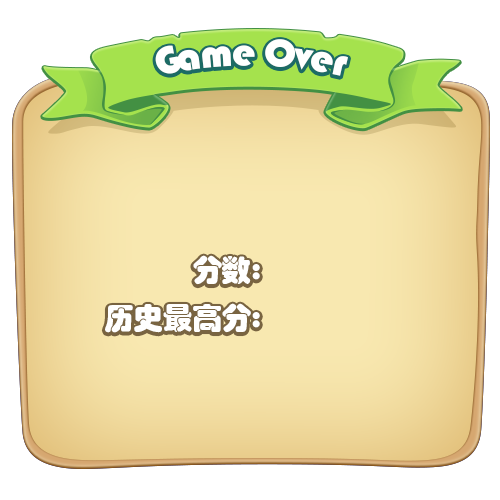
<style>
.page{position:relative;width:500px;height:500px;background:#ffffff}
.page>*{position:absolute;margin:0}
.t1{font:40px "STHupo";letter-spacing:-0.02em;color:#ffffff}
.t2{font:30px/48px "STHupo";letter-spacing:-0.02em;color:#ffffff}
</style>
<div class="page">
<p class="t1" style="left:155px;top:39px;width:193px;height:37px">Game Over</p>
<p class="t2" style="left:105px;top:255px;width:155px;height:78px;text-align:right">分数:      <br>历史最高分:</p>
</div>
